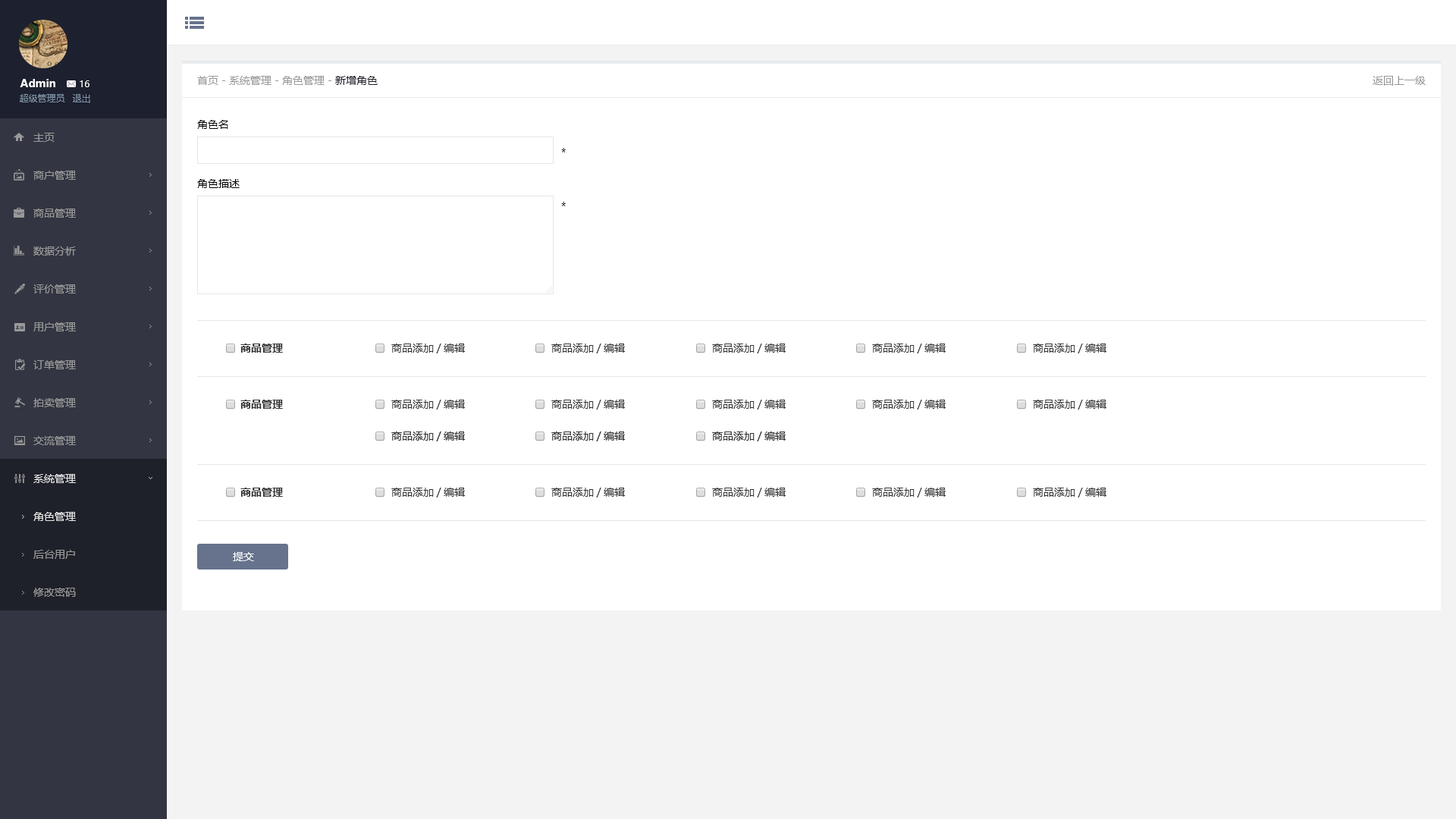
<style>
.page{position:relative;width:1456px;height:819px;background:#ffffff}
.page>*{position:absolute;margin:0}
.t1{font:10.6px "MicrosoftYaHei";color:#999999}
.t2{font:10.6px "MicrosoftYaHei";color:#1f212a}
.t3{font:10.6px "MicrosoftYaHei-Bold";color:#ffffff}
.t4{font:9.1px "MicrosoftYaHei";color:#ffffff}
.t5{font:9.1px "MicrosoftYaHei";color:#8095a8}
.t6{font:10.6px "MicrosoftYaHei";color:#000000}
.t7{font:10.6px/37.9px "MicrosoftYaHei";color:#999999}
.t8{font:10.6px/37.9px "MicrosoftYaHei";color:#e5e5e5}
.t9{font:10.6px "MicrosoftYaHei-Bold";color:#333333}
.t10{font:10.6px "MicrosoftYaHei";color:#333333}
.t11{font:10.6px/37.9px "MicrosoftYaHei";color:#e6e6e6}
.t12{font:10.6px "MicrosoftYaHei";color:#ffffff}
</style>
<div class="page">
<p class="t1" style="left:197px;top:76px;width:181px;height:9px">首页 - 系统管理 - 角色管理 - <span class="t2">新增角色</span></p>
<p class="t1" style="left:1373px;top:76px;width:53px;height:10px">返回上一级</p>
<p class="t3" style="left:20px;top:79px;width:35px;height:8px">Admin</p>
<p class="t4" style="left:80px;top:80px;width:9px;height:7px">16</p>
<p class="t5" style="left:20px;top:94px;width:45px;height:8px">超级管理员</p>
<p class="t5" style="left:72px;top:94px;width:18px;height:9px">退出</p>
<p class="t6" style="left:197px;top:120px;width:31px;height:9px">角色名</p>
<p class="t7" style="left:33px;top:133px;width:43px;height:350px">主页<br>商户管理<br>商品管理<br>数据分析<br>评价管理<br>用户管理<br>订单管理<br>拍卖管理<br>交流管理<br><span class="t8">系统管理</span></p>
<p class="t6" style="left:561px;top:148px;width:5px;height:4px">*</p>
<p class="t6" style="left:197px;top:179px;width:43px;height:9px">角色描述</p>
<p class="t6" style="left:561px;top:202px;width:5px;height:4px">*</p>
<p class="t9" style="left:240px;top:344px;width:43px;height:9px">商品管理</p>
<p class="t10" style="left:391px;top:344px;width:74px;height:9px">商品添加/编辑</p>
<p class="t10" style="left:551px;top:344px;width:74px;height:9px">商品添加/编辑</p>
<p class="t10" style="left:712px;top:344px;width:74px;height:9px">商品添加/编辑</p>
<p class="t10" style="left:872px;top:344px;width:74px;height:9px">商品添加/编辑</p>
<p class="t10" style="left:1033px;top:344px;width:73px;height:9px">商品添加/编辑</p>
<p class="t9" style="left:240px;top:400px;width:43px;height:9px">商品管理</p>
<p class="t10" style="left:391px;top:400px;width:74px;height:9px">商品添加/编辑</p>
<p class="t10" style="left:551px;top:400px;width:74px;height:9px">商品添加/编辑</p>
<p class="t10" style="left:712px;top:400px;width:74px;height:9px">商品添加/编辑</p>
<p class="t10" style="left:872px;top:400px;width:74px;height:9px">商品添加/编辑</p>
<p class="t10" style="left:1033px;top:400px;width:73px;height:9px">商品添加/编辑</p>
<p class="t9" style="left:240px;top:488px;width:43px;height:9px">商品管理</p>
<p class="t10" style="left:391px;top:488px;width:74px;height:9px">商品添加/编辑</p>
<p class="t10" style="left:551px;top:488px;width:74px;height:9px">商品添加/编辑</p>
<p class="t10" style="left:712px;top:488px;width:74px;height:9px">商品添加/编辑</p>
<p class="t10" style="left:872px;top:488px;width:74px;height:9px">商品添加/编辑</p>
<p class="t10" style="left:1033px;top:488px;width:73px;height:9px">商品添加/编辑</p>
<p class="t7" style="left:33px;top:512px;width:43px;height:85px"><span class="t11">角色管理<br></span>后台用户<br>修改密码</p>
<p class="t12" style="left:233px;top:552px;width:21px;height:9px">提交</p>
</div>
